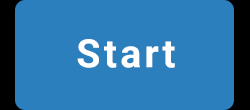
<style>
.page{position:relative;width:250px;height:110px;background:#2b7fbd}
.page>*{position:absolute;margin:0}
.t1{font:39.2px "Roboto-Bold";letter-spacing:0.085em;color:#ffffff}
</style>
<div class="page">
<p class="t1" style="left:77px;top:39px;width:98px;height:29px">Start</p>
</div>
